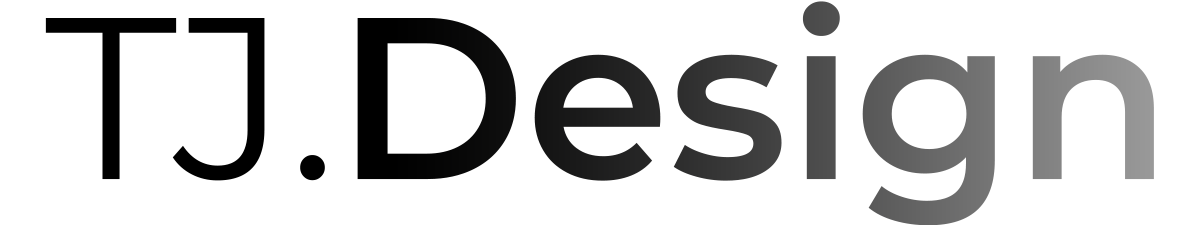
<style>
.page{position:relative;width:1200px;height:225px;background:#ffffff}
.page>*{position:absolute;margin:0}
.t1{font:230px "Montserrat-SemiBold"}
.t2{font:230px "Montserrat-Regular"}
</style>
<div class="page">
<p class="t1" style="left:45px;top:1px;width:1109px;height:225px"><span class="t2">TJ.</span>Design</p>
</div>
